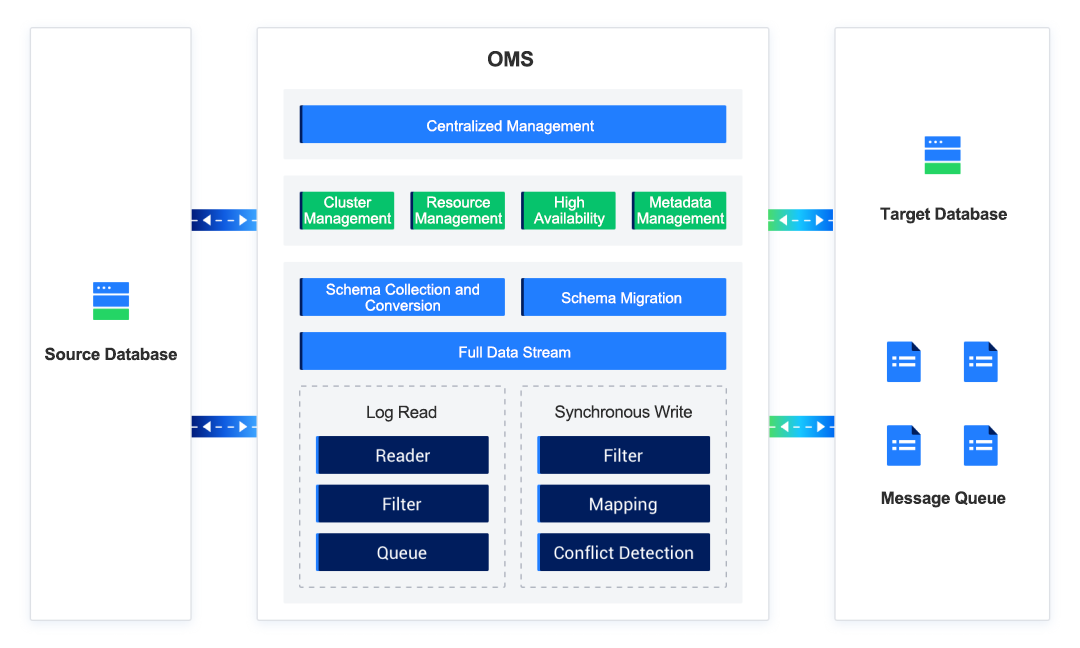
<style>
.page{position:relative;width:1080px;height:648px;background:#ffffff}
.page>*{position:absolute;margin:0}
.t1{font:21px "Arial-BoldMT";letter-spacing:-0.02em;color:#2f2f2f}
.t2{font:15px "ArialMT";color:#ffffff}
.t3{font:15px/16px "ArialMT";color:#ffffff}
.t4{font:17px "Arial-BoldMT";letter-spacing:-0.02em;color:#2e2e2e}
.t5{font:17px "ArialMT";letter-spacing:-0.02em;color:#2e2e2e}
</style>
<div class="page">
<p class="t1" style="left:488px;top:51px;width:46px;height:16px">OMS</p>
<p class="t2" style="left:427px;top:120px;width:167px;height:15px">Centralized Management</p>
<p class="t3" style="left:304px;top:196px;width:88px;height:31px;text-align:center">Cluster Management</p>
<p class="t3" style="left:415px;top:196px;width:88px;height:31px;text-align:center">Resource Management</p>
<p class="t3" style="left:533px;top:196px;width:72px;height:31px;text-align:center">High Availability</p>
<p class="t3" style="left:637px;top:196px;width:88px;height:31px;text-align:center">Metadata Management</p>
<p class="t4" style="left:880px;top:207px;width:127px;height:17px">Target Database</p>
<p class="t3" style="left:326px;top:283px;width:153px;height:28px;text-align:center">Schema Collection and Conversion</p>
<p class="t2" style="left:561px;top:292px;width:121px;height:15px">Schema Migration</p>
<p class="t4" style="left:45px;top:347px;width:132px;height:14px">Source Database</p>
<p class="t2" style="left:459px;top:346px;width:112px;height:12px">Full Data Stream</p>
<p class="t5" style="left:367px;top:405px;width:70px;height:17px">Log Read</p>
<p class="t5" style="left:555px;top:405px;width:137px;height:17px">Synchronous Write</p>
<p class="t4" style="left:881px;top:491px;width:125px;height:17px">Message Queue</p>
</div>
